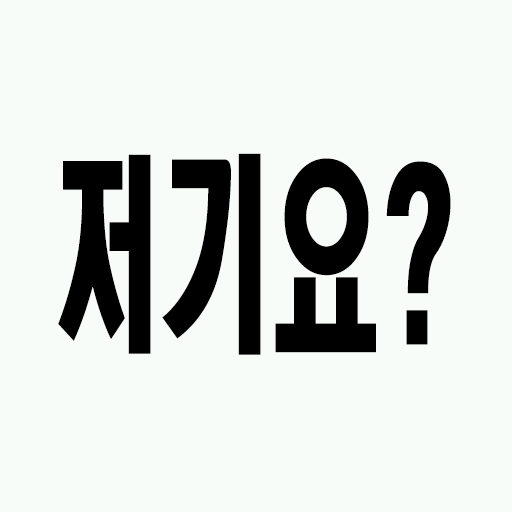
<style>
.page{position:relative;width:512px;height:512px;background:#f8fcf8}
.page>*{position:absolute;margin:0}
.t1{font:209px "HeadlineR-HM";color:#000000;scale:0.53 1}
</style>
<div class="page">
<p class="t1" style="left:58px;top:153px;width:393px;height:202px">저기요?</p>
</div>
